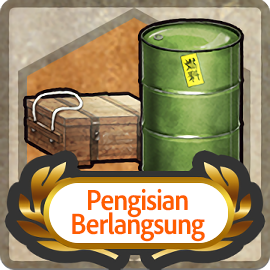
<style>
.page{position:relative;width:270px;height:270px}
.page>*{position:absolute;margin:0}
.t1{font:30px/24px "AdobeClean-Bold";letter-spacing:-0.04em;color:#ff5d00;scale:0.9 1}
</style>
<div class="page">
<p class="t1" style="left:72px;top:188px;width:133px;height:54px;text-align:center">Pengisian<br>Berlangsung</p>
</div>
